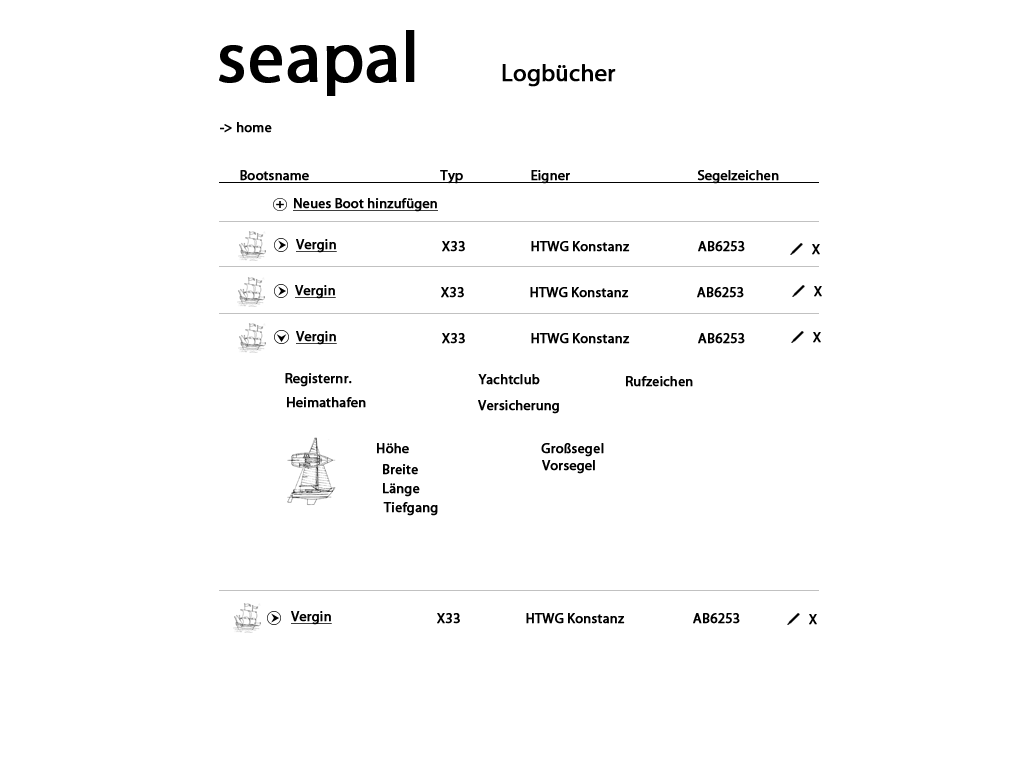
<style>
.page{position:relative;width:1024px;height:768px;background:#ffffff}
.page>*{position:absolute;margin:0}
.t1{font:72px "MyriadPro-Regular";color:#000000;font-weight:bold}
.t2{font:24px "MyriadPro-Regular";color:#000000;font-weight:bold}
.t3{font:14px "MyriadPro-Regular";color:#000000;font-weight:bold}
.t4{font:14px "MyriadPro-Regular";color:#000000;font-weight:bold;text-decoration:underline}
</style>
<div class="page">
<p class="t1" style="left:219px;top:30px;width:196px;height:66px">seapal</p>
<p class="t2" style="left:502px;top:64px;width:114px;height:23px">Logbücher</p>
<p class="t3" style="left:220px;top:122px;width:52px;height:11px">-&gt; home</p>
<p class="t3" style="left:240px;top:170px;width:69px;height:11px">Bootsname</p>
<p class="t3" style="left:440px;top:170px;width:23px;height:14px">Typ</p>
<p class="t3" style="left:531px;top:170px;width:39px;height:14px">Eigner</p>
<p class="t3" style="left:697px;top:170px;width:82px;height:14px">Segelzeichen</p>
<p class="t4" style="left:293px;top:198px;width:145px;height:14px">Neues Boot hinzufügen</p>
<p class="t4" style="left:296px;top:239px;width:41px;height:14px">Vergin</p>
<p class="t3" style="left:442px;top:241px;width:23px;height:11px">X33</p>
<p class="t3" style="left:531px;top:241px;width:99px;height:11px">HTWG Konstanz</p>
<p class="t3" style="left:698px;top:241px;width:47px;height:11px">AB6253</p>
<p class="t3" style="left:812px;top:244px;width:8px;height:11px">X</p>
<p class="t4" style="left:295px;top:285px;width:41px;height:14px">Vergin</p>
<p class="t3" style="left:441px;top:287px;width:23px;height:11px">X33</p>
<p class="t3" style="left:530px;top:287px;width:99px;height:11px">HTWG Konstanz</p>
<p class="t3" style="left:697px;top:287px;width:47px;height:11px">AB6253</p>
<p class="t3" style="left:814px;top:286px;width:8px;height:11px">X</p>
<p class="t4" style="left:296px;top:331px;width:41px;height:14px">Vergin</p>
<p class="t3" style="left:442px;top:333px;width:23px;height:11px">X33</p>
<p class="t3" style="left:531px;top:333px;width:99px;height:11px">HTWG Konstanz</p>
<p class="t3" style="left:698px;top:333px;width:47px;height:11px">AB6253</p>
<p class="t3" style="left:813px;top:332px;width:8px;height:11px">X</p>
<p class="t3" style="left:285px;top:373px;width:67px;height:14px">Registernr.</p>
<p class="t3" style="left:478px;top:374px;width:62px;height:11px">Yachtclub</p>
<p class="t3" style="left:626px;top:376px;width:67px;height:11px">Rufzeichen</p>
<p class="t3" style="left:287px;top:397px;width:79px;height:11px">Heimathafen</p>
<p class="t3" style="left:478px;top:400px;width:81px;height:14px">Versicherung</p>
<p class="t3" style="left:377px;top:443px;width:32px;height:11px">Höhe</p>
<p class="t3" style="left:541px;top:443px;width:63px;height:14px">Großsegel</p>
<p class="t3" style="left:542px;top:460px;width:53px;height:14px">Vorsegel</p>
<p class="t3" style="left:383px;top:464px;width:35px;height:11px">Breite</p>
<p class="t3" style="left:383px;top:483px;width:37px;height:14px">Länge</p>
<p class="t3" style="left:383px;top:502px;width:55px;height:14px">Tiefgang</p>
<p class="t4" style="left:291px;top:611px;width:41px;height:14px">Vergin</p>
<p class="t3" style="left:437px;top:613px;width:23px;height:11px">X33</p>
<p class="t3" style="left:526px;top:613px;width:99px;height:11px">HTWG Konstanz</p>
<p class="t3" style="left:693px;top:613px;width:47px;height:11px">AB6253</p>
<p class="t3" style="left:809px;top:614px;width:8px;height:11px">X</p>
</div>
